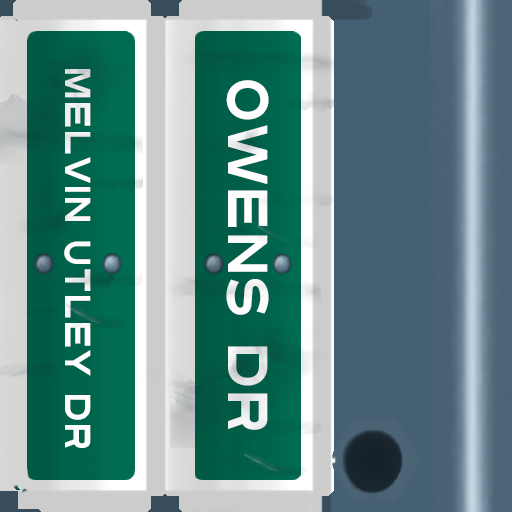
<style>
.page{position:relative;width:512px;height:512px}
.page>*{position:absolute;margin:0}
.t1{font:36px "Turnpike";color:#fefeff;scale:0.75 1}
.t2{font:56px "Turnpike";color:#fefeff;scale:0.75 1}
</style>
<div class="page">
<p class="t1" style="left:64px;top:69px;width:27px;height:379px;rotate:90deg">Melvin Utley Dr</p>
<p class="t2" style="left:226px;top:80px;width:43px;height:350px;rotate:90deg">Owens Dr</p>
</div>
